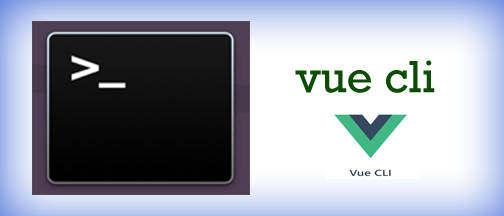
<style>
.page{position:relative;width:504px;height:216px}
.page>*{position:absolute;margin:0}
.t1{font:46px "Rockwell";color:#0a4d01}
</style>
<div class="page">
<p class="t1" style="left:295px;top:60px;width:140px;height:33px">vue cli</p>
</div>
